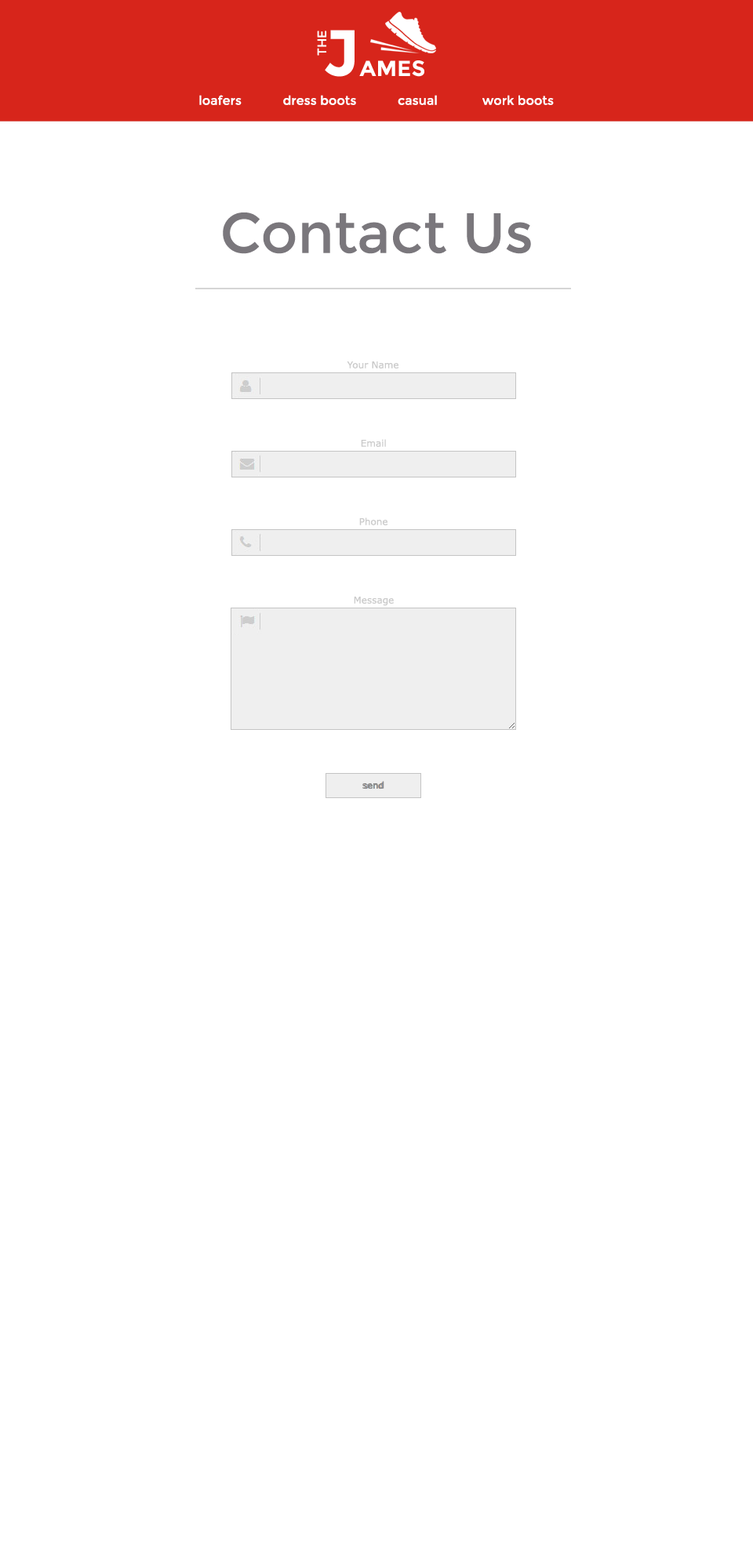
<style>
.page{position:relative;width:753px;height:1568px;background:#ffffff}
.page>*{position:absolute;margin:0}
.t1{font:12.5px "Montserrat-Regular";color:#ffffff}
.t2{font:56.4px "Montserrat-Regular";color:#79777b}
.t3{font:9.4px "Verdana";color:#cacaca}
.t4{font:9.4px "Verdana";color:#8a8a8a}
</style>
<div class="page">
<p class="t1" style="left:199px;top:95px;width:355px;height:10px">loafers            dress boots            casual             work boots</p>
<p class="t2" style="left:223px;top:212px;width:308px;height:42px">Contact Us</p>
<p class="t3" style="left:347px;top:361px;width:51px;height:7px">Your Name</p>
<p class="t3" style="left:361px;top:439px;width:25px;height:8px">Email</p>
<p class="t3" style="left:359px;top:517px;width:28px;height:8px">Phone</p>
<p class="t3" style="left:354px;top:597px;width:40px;height:9px">Message</p>
<p class="t4" style="left:362px;top:781px;width:22px;height:8px">send</p>
</div>
